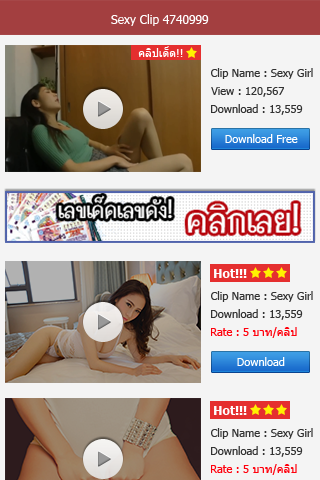
<style>
.page{position:relative;width:320px;height:480px;background:#f4f4f4}
.page>*{position:absolute;margin:0}
.t1{font:12px "Tahoma";color:#ffffff}
.t2{font:11px "Tahoma";color:#ffffff}
.t3{font:11px "Tahoma";color:#323232}
.t4{font:12px "Tahoma-Bold";color:#ffffff}
.t5{font:11px "Tahoma";color:#ff000c}
</style>
<div class="page">
<p class="t1" style="left:111px;top:14px;width:98px;height:12px">Sexy Clip 4740999</p>
<p class="t2" style="left:138px;top:46px;width:45px;height:11px">คลิปเด็ด!!</p>
<p class="t3" style="left:211px;top:68px;width:102px;height:11px">Clip Name : Sexy Girl</p>
<p class="t3" style="left:211px;top:87px;width:73px;height:10px">View : 120,567</p>
<p class="t3" style="left:211px;top:104px;width:92px;height:11px">Download : 13,559</p>
<p class="t2" style="left:225px;top:134px;width:73px;height:9px">Download Free</p>
<p class="t4" style="left:214px;top:269px;width:33px;height:9px">Hot!!!</p>
<p class="t3" style="left:211px;top:291px;width:102px;height:11px">Clip Name : Sexy Girl</p>
<p class="t3" style="left:211px;top:309px;width:92px;height:11px">Download : 13,559</p>
<p class="t5" style="left:211px;top:327px;width:86px;height:11px">Rate : 5 บาท/คลิป</p>
<p class="t2" style="left:237px;top:357px;width:48px;height:9px">Download</p>
<p class="t4" style="left:214px;top:406px;width:33px;height:9px">Hot!!!</p>
<p class="t3" style="left:211px;top:428px;width:102px;height:11px">Clip Name : Sexy Girl</p>
<p class="t3" style="left:211px;top:446px;width:92px;height:11px">Download : 13,559</p>
<p class="t5" style="left:211px;top:464px;width:86px;height:11px">Rate : 5 บาท/คลิป</p>
</div>
